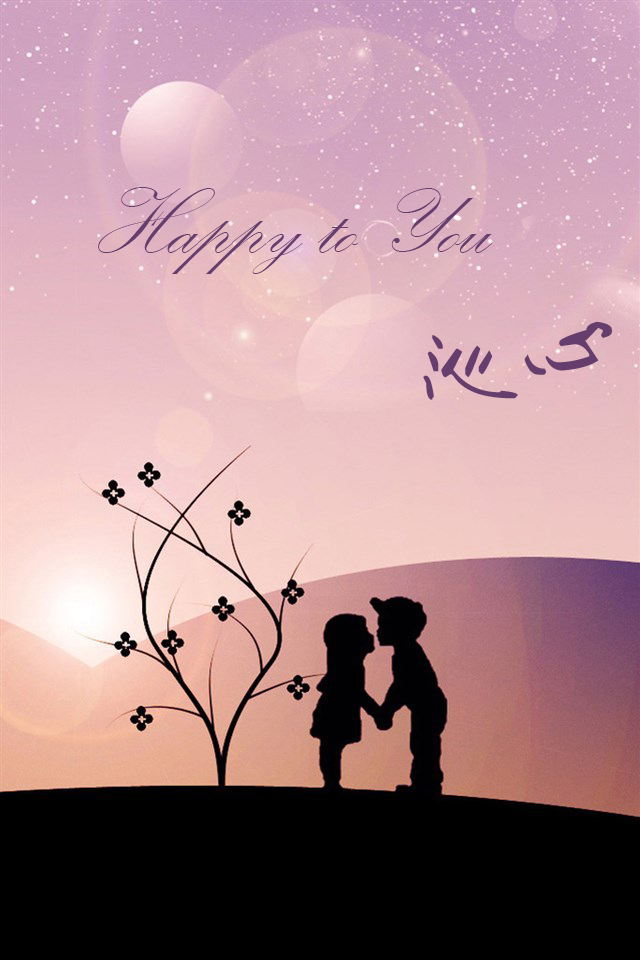
<style>
.page{position:relative;width:640px;height:960px}
.page>*{position:absolute;margin:0}
.t1{font:96px "KunstlerScript";color:#653e6d}
.t2{font:96px "Ò¶¸ùÓÑ¸Ö±ÊÐÐÊé¼òÌå";color:#653e6d}
</style>
<div class="page">
<p class="t1" style="left:98px;top:187px;width:395px;height:87px">Happy to You</p>
<p class="t2" style="left:423px;top:321px;width:189px;height:79px">沁心</p>
</div>
